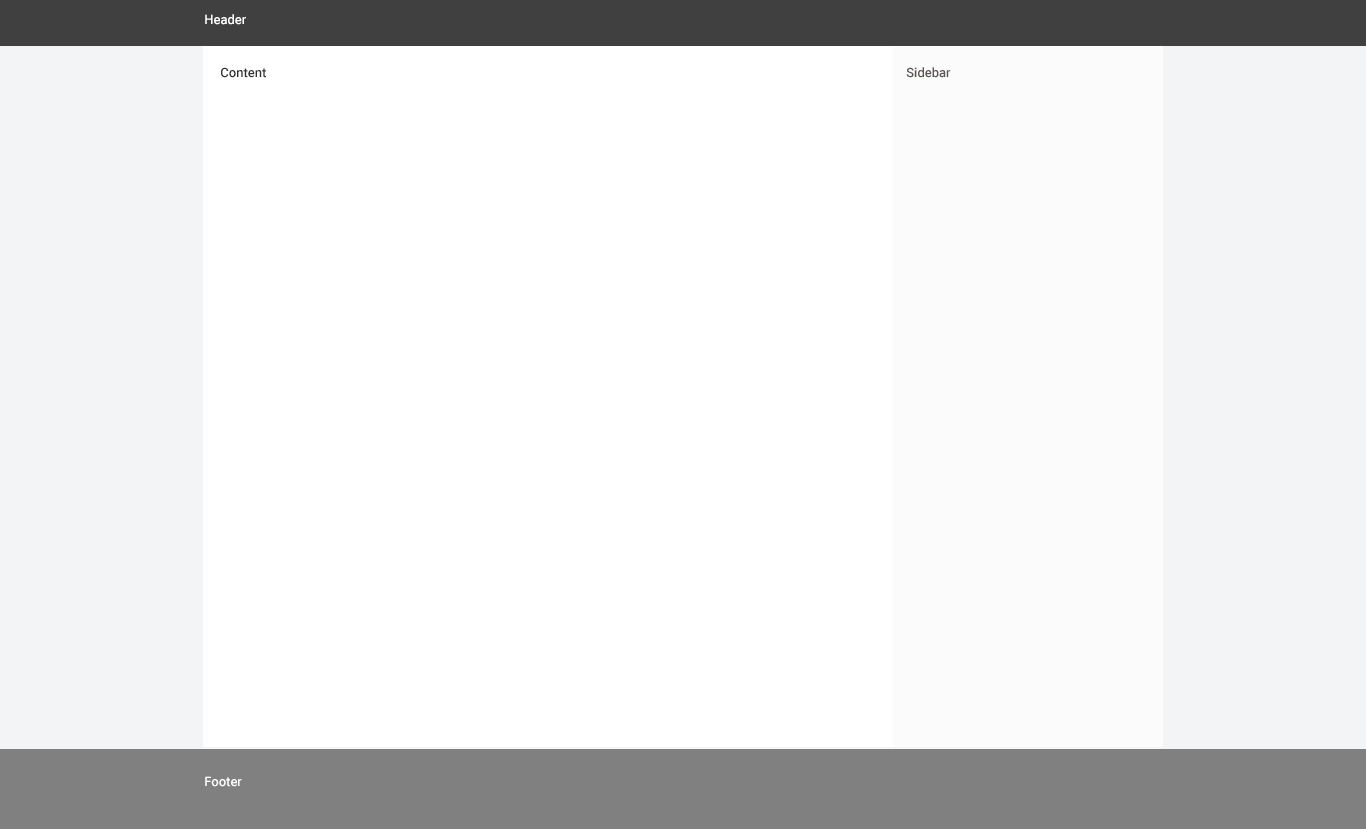
<style>
.page{position:relative;width:1366px;height:829px;background:#ffffff}
.page>*{position:absolute;margin:0}
.t1{font:13px "Roboto-Medium";color:#ffffff}
.t2{font:13px "Roboto-Medium";color:#303030}
.t3{font:13px "Roboto-Medium";color:#5b5252}
</style>
<div class="page">
<p class="t1" style="left:205px;top:14px;width:41px;height:11px">Header</p>
<p class="t2" style="left:221px;top:67px;width:45px;height:11px">Content</p>
<p class="t3" style="left:906px;top:67px;width:45px;height:11px">Sidebar</p>
<p class="t1" style="left:205px;top:776px;width:37px;height:11px">Footer</p>
</div>
